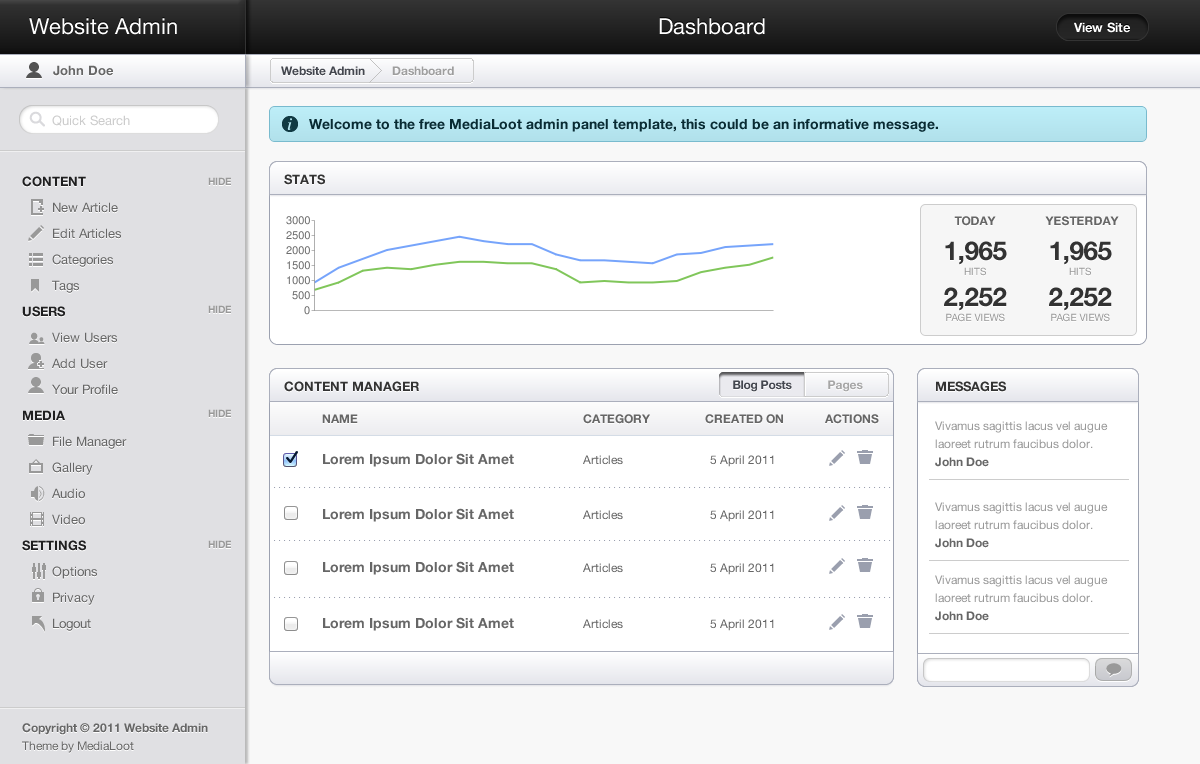
<style>
.page{position:relative;width:1200px;height:764px;background:#ffffff}
.page>*{position:absolute;margin:0}
.t1{font:22px "HelveticaNeue";color:#ffffff}
.t2{font:13px "HelveticaNeue-Bold";color:#ffffff}
.t3{font:13px "HelveticaNeue-Bold";color:#666666}
.t4{font:12px "HelveticaNeue-Bold";color:#44474f}
.t5{font:12px "HelveticaNeue-Bold";color:#9e9e9e}
.t6{font:13px "HelveticaNeue";color:#cccccc}
.t7{font:13px "HelveticaNeue-Bold";color:#333333}
.t8{font:13px/26px "HelveticaNeue";color:#666666}
.t9{font:13px/26px "HelveticaNeue-Bold";color:#1f1f20}
.t10{font:10px "HelveticaNeue-Bold";color:#999999}
.t11{font:12px "HelveticaNeue-Bold";color:#666666}
.t12{font:26px "HelveticaNeue-Bold";color:#333333}
.t13{font:10px "HelveticaNeue";color:#999999}
.t14{font:12px "HelveticaNeue-Bold";color:#a6a6a6}
.t15{font:12px/18px "HelveticaNeue";color:#999999}
.t16{font:12px/18px "HelveticaNeue-Bold";color:#666666}
.t17{font:14px "HelveticaNeue-Bold";color:#666666}
.t18{font:12px "HelveticaNeue";color:#666666}
.t19{font:12px/18px "HelveticaNeue";color:#666666}
</style>
<div class="page">
<p class="t1" style="left:29px;top:18px;width:148px;height:17px">Website Admin</p>
<p class="t1" style="left:659px;top:18px;width:106px;height:17px">Dashboard</p>
<p class="t2" style="left:1074px;top:22px;width:56px;height:11px">View Site</p>
<p class="t3" style="left:53px;top:65px;width:60px;height:11px">John Doe</p>
<p class="t4" style="left:281px;top:66px;width:84px;height:10px">Website Admin</p>
<p class="t5" style="left:392px;top:66px;width:62px;height:10px">Dashboard</p>
<p class="t6" style="left:52px;top:115px;width:78px;height:11px">Quick Search</p>
<p class="t7" style="left:284px;top:174px;width:41px;height:11px">STATS</p>
<p class="t8" style="left:22px;top:176px;width:105px;height:455px"><span class="t9">CONTENT<br></span>New Article<br>Edit Articles<br>Categories<br>Tags<br><span class="t9">USERS<br></span>View Users<br>Add User<br>Your Profile<br><span class="t9">MEDIA<br></span>File Manager<br>Gallery<br>Audio<br>Video<br><span class="t9">SETTINGS<br></span>Options<br>Privacy<br>Logout</p>
<p class="t10" style="left:208px;top:177px;width:23px;height:8px">HIDE</p>
<p class="t11" style="left:954px;top:216px;width:42px;height:10px">TODAY</p>
<p class="t11" style="left:1045px;top:216px;width:74px;height:10px">YESTERDAY</p>
<p class="t12" style="left:945px;top:241px;width:62px;height:24px">1,965</p>
<p class="t12" style="left:1050px;top:241px;width:62px;height:24px">1,965</p>
<p class="t13" style="left:964px;top:267px;width:22px;height:9px">HITS</p>
<p class="t13" style="left:1069px;top:267px;width:22px;height:9px">HITS</p>
<p class="t12" style="left:944px;top:287px;width:63px;height:24px">2,252</p>
<p class="t12" style="left:1049px;top:287px;width:63px;height:24px">2,252</p>
<p class="t10" style="left:208px;top:305px;width:23px;height:8px">HIDE</p>
<p class="t13" style="left:946px;top:313px;width:59px;height:9px">PAGE VIEWS</p>
<p class="t13" style="left:1051px;top:313px;width:59px;height:9px">PAGE VIEWS</p>
<p class="t7" style="left:284px;top:381px;width:135px;height:11px">CONTENT MANAGER</p>
<p class="t4" style="left:733px;top:380px;width:59px;height:12px">Blog Posts</p>
<p class="t14" style="left:828px;top:380px;width:35px;height:12px">Pages</p>
<p class="t7" style="left:936px;top:381px;width:70px;height:11px">MESSAGES</p>
<p class="t10" style="left:208px;top:409px;width:23px;height:8px">HIDE</p>
<p class="t11" style="left:322px;top:414px;width:36px;height:9px">NAME</p>
<p class="t11" style="left:583px;top:414px;width:67px;height:10px">CATEGORY</p>
<p class="t11" style="left:705px;top:414px;width:78px;height:10px">CREATED ON</p>
<p class="t11" style="left:825px;top:414px;width:54px;height:10px">ACTIONS</p>
<p class="t15" style="left:935px;top:421px;width:173px;height:46px">Vivamus sagittis lacus vel augue laoreet rutrum faucibus dolor.<br><span class="t16">John Doe</span></p>
<p class="t17" style="left:323px;top:453px;width:191px;height:14px">Lorem Ipsum Dolor Sit Amet</p>
<p class="t18" style="left:583px;top:455px;width:40px;height:10px">Articles</p>
<p class="t18" style="left:710px;top:455px;width:64px;height:12px">5 April 2011</p>
<p class="t17" style="left:323px;top:508px;width:191px;height:14px">Lorem Ipsum Dolor Sit Amet</p>
<p class="t18" style="left:583px;top:510px;width:40px;height:10px">Articles</p>
<p class="t18" style="left:710px;top:510px;width:64px;height:12px">5 April 2011</p>
<p class="t15" style="left:935px;top:502px;width:173px;height:46px">Vivamus sagittis lacus vel augue laoreet rutrum faucibus dolor.<br><span class="t16">John Doe</span></p>
<p class="t10" style="left:208px;top:540px;width:23px;height:8px">HIDE</p>
<p class="t17" style="left:323px;top:561px;width:191px;height:14px">Lorem Ipsum Dolor Sit Amet</p>
<p class="t18" style="left:583px;top:563px;width:40px;height:10px">Articles</p>
<p class="t18" style="left:710px;top:563px;width:64px;height:12px">5 April 2011</p>
<p class="t15" style="left:935px;top:575px;width:173px;height:46px">Vivamus sagittis lacus vel augue laoreet rutrum faucibus dolor.<br><span class="t16">John Doe</span></p>
<p class="t17" style="left:323px;top:617px;width:191px;height:14px">Lorem Ipsum Dolor Sit Amet</p>
<p class="t18" style="left:583px;top:619px;width:40px;height:10px">Articles</p>
<p class="t18" style="left:710px;top:619px;width:64px;height:12px">5 April 2011</p>
<p class="t16" style="left:22px;top:723px;width:186px;height:30px">Copyright © 2011 Website Admin<br><span class="t19">Theme by MediaLoot</span></p>
</div>
